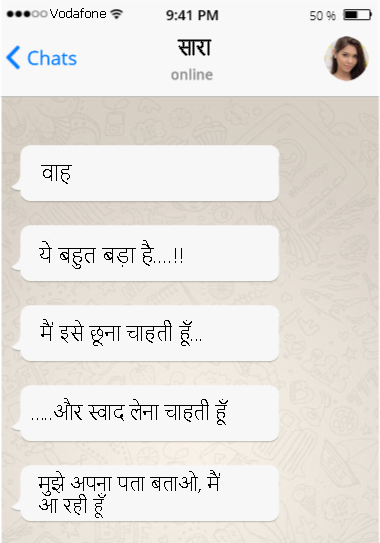
<style>
.page{position:relative;width:380px;height:543px;background:#f7f7f7}
.page>*{position:absolute;margin:0}
.t1{font:12px "Verdana";color:#000000}
.t2{font:19.8px "NirmalaUI-Semilight";color:#000000}
.t3{font:22px "NirmalaUI-Semilight";color:#000000}
.t4{font:21.2px "NirmalaUI-Semilight";color:#000000}
.t5{font:19.9px "NirmalaUI-Semilight";color:#000000}
.t6{font:19.5px "NirmalaUI-Semilight";color:#000000}
.t7{font:19px "NirmalaUI-Semilight";color:#000000}
</style>
<div class="page">
<p class="t1" style="left:50px;top:8px;width:56px;height:10px">Vodafone</p>
<p class="t2" style="left:178px;top:40px;width:33px;height:15px">सारा</p>
<p class="t3" style="left:41px;top:165px;width:31px;height:19px">वाह</p>
<p class="t4" style="left:39px;top:240px;width:143px;height:29px">ये बहुत बड़ा है….!!</p>
<p class="t5" style="left:40px;top:319px;width:161px;height:27px">मैं इसे छूना चाहती हूँ...</p>
<p class="t6" style="left:32px;top:398px;width:196px;height:27px">…..और स्वाद लेना चाहती हूँ</p>
<p class="t7" style="left:38px;top:470px;width:182px;height:48px">मुझे अपना पता बताओ, मैं<br>आ रही हूँ</p>
</div>
